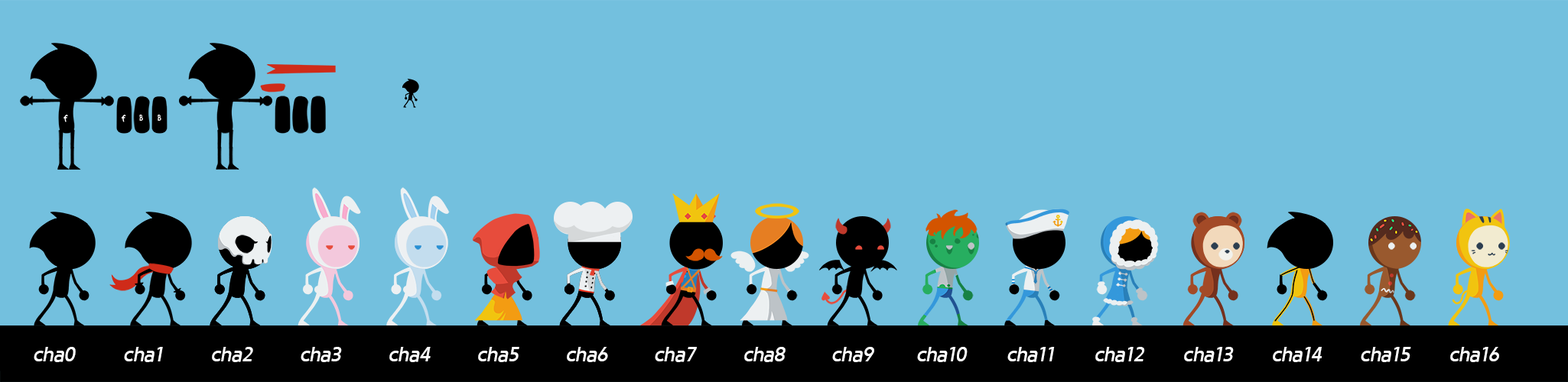
<style>
.page{position:relative;width:1568px;height:382px;background:#73c0de}
.page>*{position:absolute;margin:0}
.t1{font:19.1px "GodoM";color:#ffffff;font-style:italic}
</style>
<div class="page">
<p class="t1" style="left:34px;top:347px;width:42px;height:16px">cha0</p>
<p class="t1" style="left:124px;top:347px;width:39px;height:16px">cha1</p>
<p class="t1" style="left:212px;top:347px;width:41px;height:16px">cha2</p>
<p class="t1" style="left:301px;top:347px;width:41px;height:16px">cha3</p>
<p class="t1" style="left:389px;top:347px;width:42px;height:16px">cha4</p>
<p class="t1" style="left:478px;top:347px;width:41px;height:16px">cha5</p>
<p class="t1" style="left:567px;top:347px;width:41px;height:16px">cha6</p>
<p class="t1" style="left:655px;top:347px;width:42px;height:16px">cha7</p>
<p class="t1" style="left:744px;top:347px;width:42px;height:16px">cha8</p>
<p class="t1" style="left:832px;top:347px;width:42px;height:16px">cha9</p>
<p class="t1" style="left:917px;top:347px;width:51px;height:16px">cha10</p>
<p class="t1" style="left:1007px;top:347px;width:48px;height:16px">cha11</p>
<p class="t1" style="left:1095px;top:347px;width:50px;height:16px">cha12</p>
<p class="t1" style="left:1184px;top:347px;width:50px;height:16px">cha13</p>
<p class="t1" style="left:1273px;top:347px;width:49px;height:16px">cha14</p>
<p class="t1" style="left:1361px;top:347px;width:50px;height:16px">cha15</p>
<p class="t1" style="left:1450px;top:347px;width:49px;height:16px">cha16</p>
</div>
